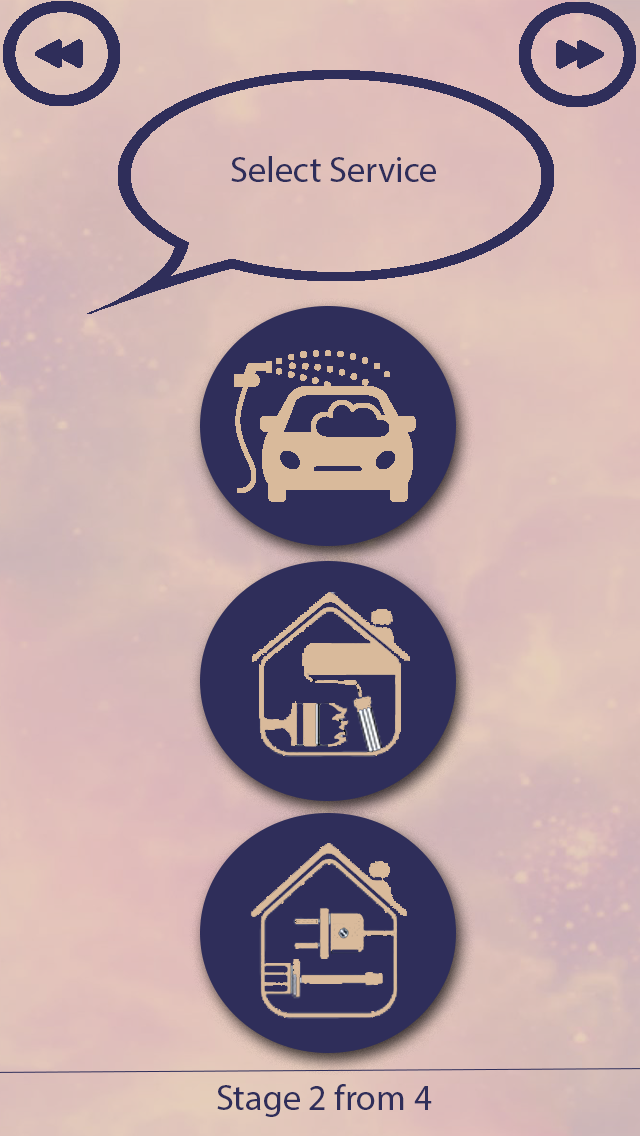
<style>
.page{position:relative;width:640px;height:1136px}
.page>*{position:absolute;margin:0}
.t1{font:36px "MyriadPro-Regular";color:#2f2e5a}
</style>
<div class="page">
<p class="t1" style="left:231px;top:156px;width:205px;height:26px">Select Service</p>
<p class="t1" style="left:217px;top:1084px;width:215px;height:33px">4 from 2 Stage</p>
</div>
